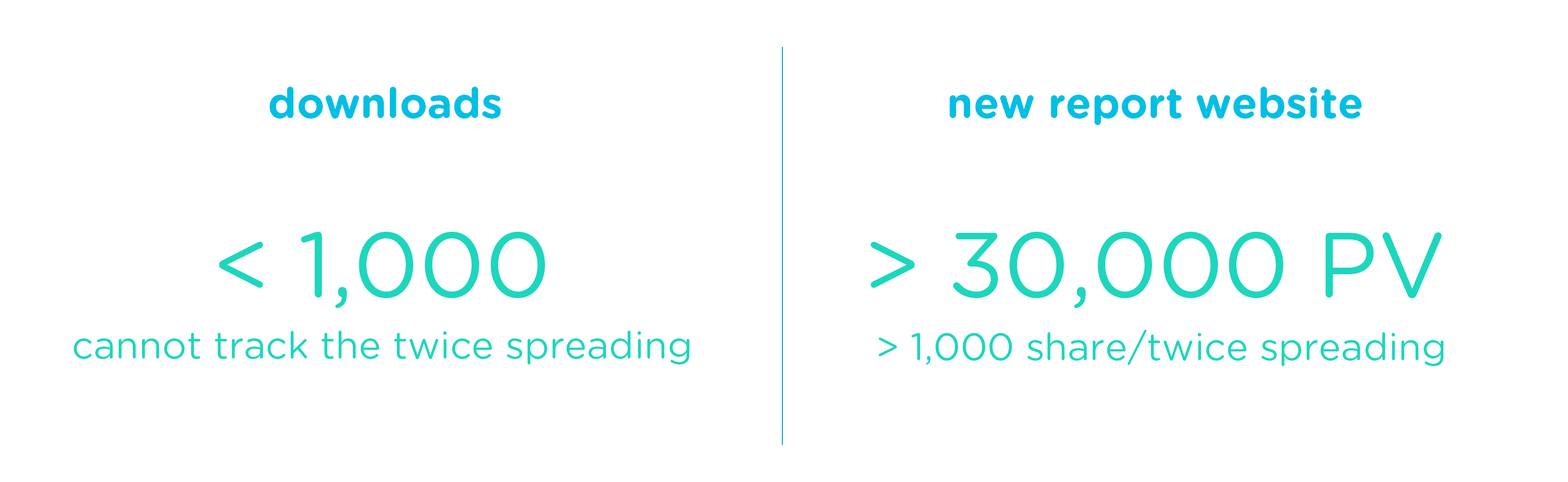
<style>
.page{position:relative;width:1568px;height:482px;background:#ffffff}
.page>*{position:absolute;margin:0}
.t1{font:42.3px "GothamRounded-Bold";color:#00bfe4}
.t2{font:91.8px "GothamRounded-Book";color:#1dd6be}
.t3{font:37.8px "GothamRounded-Book";color:#1dd6be}
</style>
<div class="page">
<p class="t1" style="left:270px;top:87px;width:231px;height:32px">downloads</p>
<p class="t1" style="left:950px;top:87px;width:412px;height:38px">new report website</p>
<p class="t2" style="left:219px;top:231px;width:326px;height:78px">&lt; 1,000</p>
<p class="t2" style="left:871px;top:231px;width:571px;height:78px">&gt; 30,000 PV</p>
<p class="t3" style="left:879px;top:330px;width:565px;height:36px">&gt; 1,000 share/twice spreading</p>
<p class="t3" style="left:74px;top:330px;width:616px;height:35px">cannot track the twice spreading</p>
</div>
